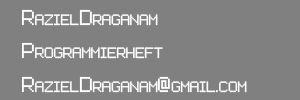
<style>
.page{position:relative;width:300px;height:100px;background:#808080}
.page>*{position:absolute;margin:0}
.t1{font:33.3px/33.3px "Advanced_Pixel-7";color:#ffffff;font-variant:small-caps}
</style>
<div class="page">
<p class="t1" style="left:22px;top:9px;width:225px;height:84px">RazielDraganam<br>Programmierheft<br>RazielDraganam@gmail.com</p>
</div>
